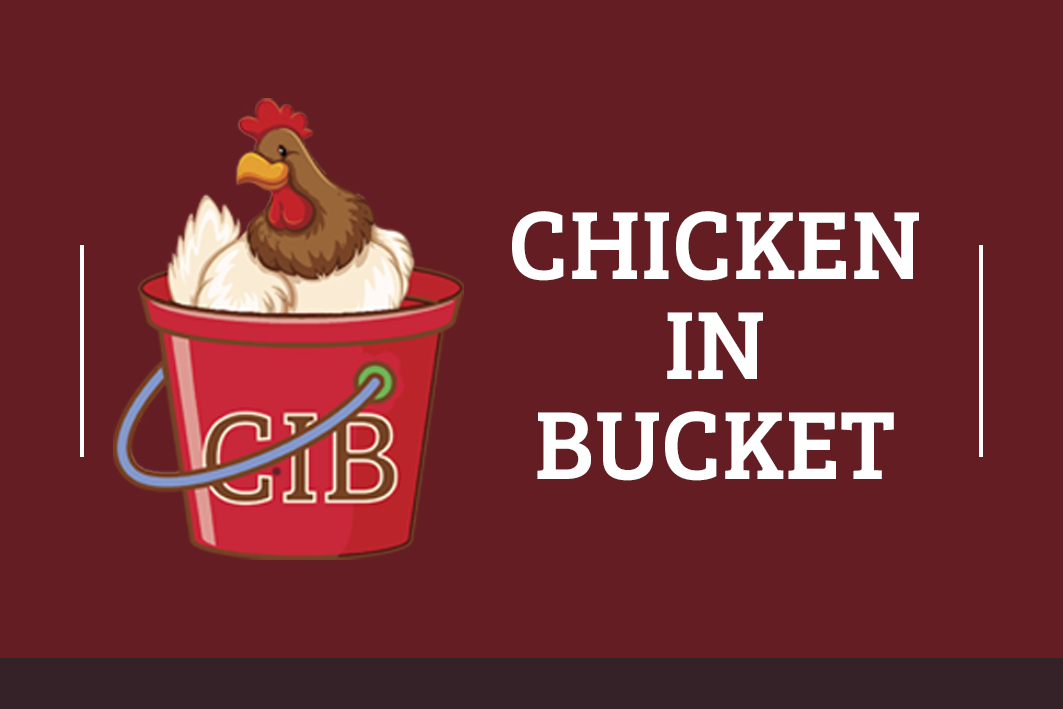
<style>
.page{position:relative;width:1063px;height:709px;background:#641e23}
.page>*{position:absolute;margin:0}
.t1{font:100px/100px "BreeSerif-Regular";letter-spacing:0.005em;color:#ffffff;text-transform:uppercase}
</style>
<div class="page">
<p class="t1" style="left:512px;top:211px;width:407px;height:270px;text-align:center">Chicken<br>In<br>Bucket</p>
</div>
